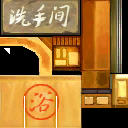
<style>
.page{position:relative;width:128px;height:128px}
.page>*{position:absolute;margin:0}
.t1{font:29px "SJlingyunzhangcao";color:#f4f2dd;font-style:italic}
.t2{font:29px "SJlingyunzhangcao";font-style:italic}
.t3{font:27px "JXC";color:#edebc9;font-weight:bold;font-style:italic}
.t4{font:27px "JXC";color:#f15412;font-weight:bold;font-style:italic}
</style>
<div class="page">
<p class="t1" style="left:9px;top:6px;width:22px;height:20px">洗</p>
<p class="t2" style="left:32px;top:4px;width:15px;height:23px">手</p>
<p class="t3" style="left:49px;top:5px;width:21px;height:22px">间</p>
<p class="t4" style="left:29px;top:91px;width:25px;height:21px">浴</p>
</div>
